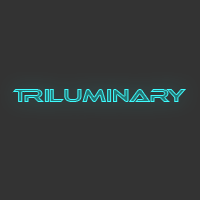
<style>
.page{position:relative;width:200px;height:200px;background:#333333}
.page>*{position:absolute;margin:0}
.t1{font:17.6px "Ethnocentric"}
</style>
<div class="page">
<p class="t1" style="left:12px;top:89px;width:174px;height:13px">Triluminary</p>
</div>
